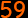
<style>
.page{position:relative;width:28px;height:18px;background:#000000}
.page>*{position:absolute;margin:0}
.t1{font:23.1px "Quicksand-Medium";color:#ff6600}
</style>
<div class="page">
<p class="t1" style="left:1px;top:1px;width:24px;height:17px">59</p>
</div>
